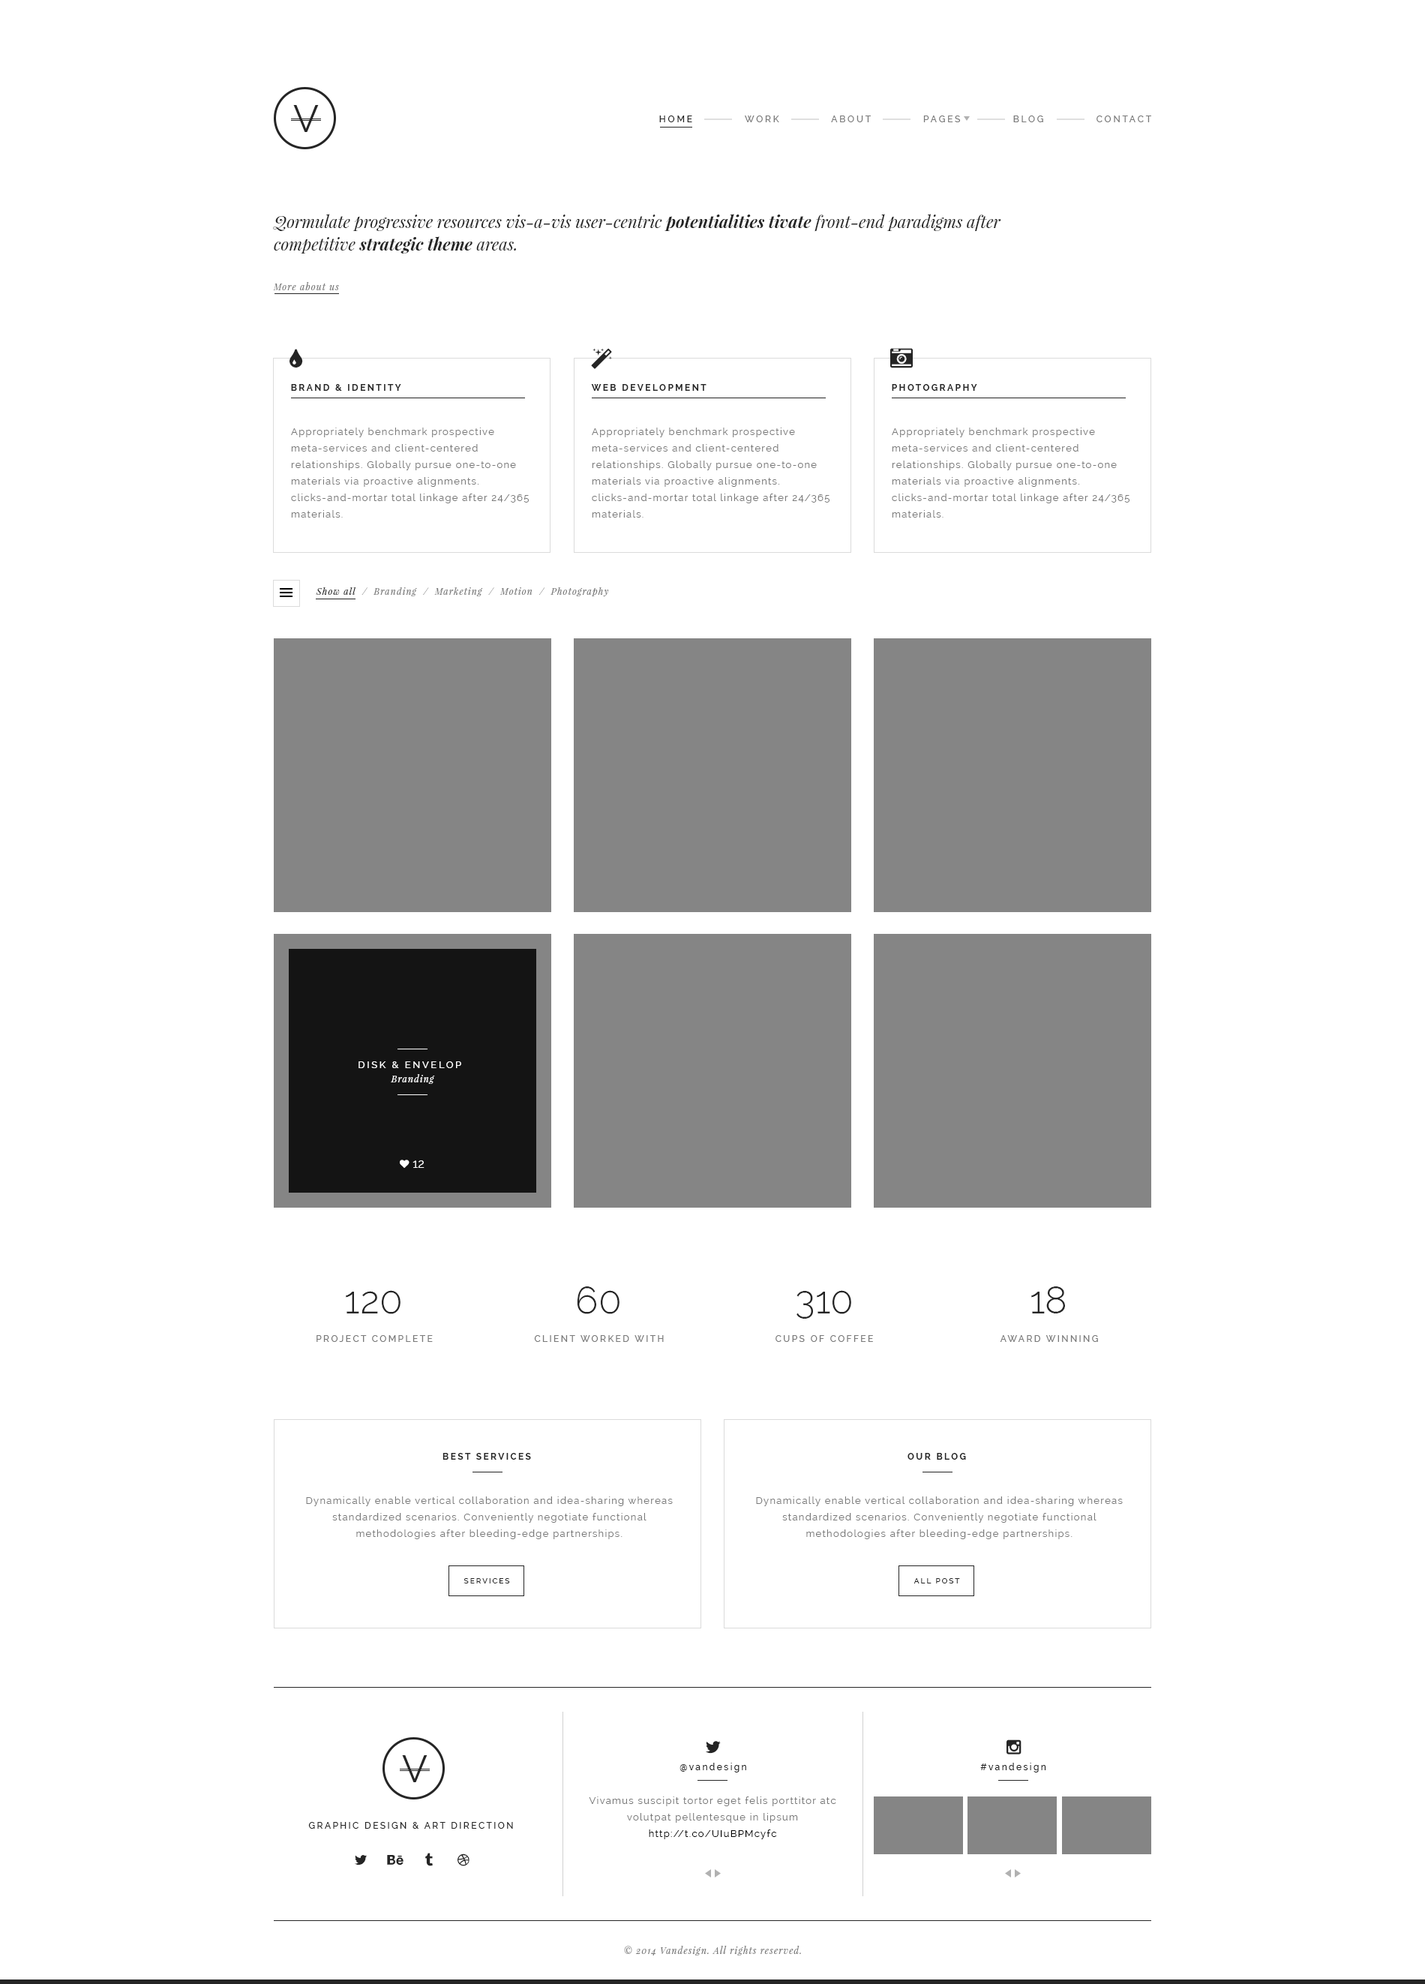
<style>
.page{position:relative;width:1425px;height:1984px;background:#ffffff}
.page>*{position:absolute;margin:0}
.t1{font:9px "Raleway-Medium";letter-spacing:0.2em;color:#7a7a7a;text-transform:uppercase;scale:1.04 1}
.t2{font:9px "Raleway-Medium";letter-spacing:0.2em;color:#252525;text-transform:uppercase;scale:1.04 1}
.t3{font:16.5px/22.5px "PlayfairDisplay-Italic";color:#252525}
.t4{font:16.5px/22.5px "PlayfairDisplay-BoldItalic";color:#252525}
.t5{font:9px "PlayfairDisplay-Italic";letter-spacing:0.1em;color:#7a7a7a}
.t6{font:9px "Raleway-Bold";letter-spacing:0.2em;color:#252525;text-transform:uppercase}
.t7{font:9.8px/16.5px "Raleway";letter-spacing:0.1em;color:#7a7a7a}
.t8{font:8.9px "PlayfairDisplay-Italic";letter-spacing:0.1em;color:#7a7a7a}
.t9{font:8.9px "PlayfairDisplay-Italic";letter-spacing:0.1em;color:#252525}
.t10{font:9.8px "Raleway-Medium";letter-spacing:0.2em;color:#ffffff;text-transform:uppercase}
.t11{font:9px "PlayfairDisplay-Italic";letter-spacing:0.1em;color:#ffffff}
.t12{font:12px "Raleway";color:#ffffff;text-transform:uppercase}
.t13{font:37.5px "Raleway-Light";color:#252525;text-transform:uppercase}
.t14{font:9px "Raleway-Medium";letter-spacing:0.2em;color:#7a7a7a}
.t15{font:7.5px "Raleway-Medium";letter-spacing:0.2em;color:#252525}
.t16{font:9px "Raleway-Medium";letter-spacing:0.2em;color:#252525}
.t17{font:9.8px/16.5px "Raleway";letter-spacing:0.1em;color:#000000}
.t18{font:9px "Raleway-Medium";letter-spacing:0.2em;color:#252525;text-transform:uppercase}
</style>
<div class="page">
<p class="t1" style="left:659px;top:116px;width:492px;height:6px"><span class="t2">HOME            </span>Work            About            Pages            Blog            Contact</p>
<p class="t3" style="left:273px;top:214px;width:728px;height:40px">Qormulate progressive resources vis-a-vis user-centric <span class="t4">potentialities tivate</span> front-end paradigms after competitive <span class="t4">strategic theme</span> areas.</p>
<p class="t5" style="left:273px;top:282px;width:66px;height:8px">More about us</p>
<p class="t6" style="left:291px;top:384px;width:110px;height:7px">BRAND &amp; IDENTITY</p>
<p class="t6" style="left:591px;top:384px;width:115px;height:7px">WEB DEVELOPMENT</p>
<p class="t6" style="left:892px;top:384px;width:85px;height:7px">PHOTOGRAPHY</p>
<p class="t7" style="left:291px;top:428px;width:238px;height:90px">Appropriately benchmark prospective meta-services and client-centered relationships. Globally pursue one-to-one materials via proactive alignments. clicks-and-mortar total linkage after 24/365 materials.</p>
<p class="t7" style="left:592px;top:428px;width:238px;height:90px">Appropriately benchmark prospective meta-services and client-centered relationships. Globally pursue one-to-one materials via proactive alignments. clicks-and-mortar total linkage after 24/365 materials.</p>
<p class="t7" style="left:892px;top:428px;width:238px;height:90px">Appropriately benchmark prospective meta-services and client-centered relationships. Globally pursue one-to-one materials via proactive alignments. clicks-and-mortar total linkage after 24/365 materials.</p>
<p class="t8" style="left:316px;top:587px;width:293px;height:9px"><span class="t9">Show all </span> /  Branding  /  Marketing  /  Motion  /  Photography</p>
<p class="t10" style="left:358px;top:1061px;width:103px;height:7px">DISK &amp; ENVELOP</p>
<p class="t11" style="left:391px;top:1074px;width:44px;height:10px">Branding</p>
<p class="t12" style="left:412px;top:1160px;width:12px;height:8px">12</p>
<p class="t13" style="left:577px;top:1286px;width:43px;height:28px">60</p>
<p class="t13" style="left:1031px;top:1286px;width:34px;height:27px">18</p>
<p class="t13" style="left:346px;top:1290px;width:54px;height:24px">120</p>
<p class="t13" style="left:796px;top:1290px;width:55px;height:28px">310</p>
<p class="t14" style="left:316px;top:1335px;width:117px;height:7px">PROJECT COMPLETE</p>
<p class="t14" style="left:534px;top:1335px;width:130px;height:7px">CLIENT WORKED WITH</p>
<p class="t14" style="left:776px;top:1335px;width:97px;height:7px">CUPS OF COFFEE</p>
<p class="t14" style="left:1000px;top:1335px;width:98px;height:7px">AWARD WINNING</p>
<p class="t6" style="left:442px;top:1453px;width:89px;height:7px">BEST SERVICES</p>
<p class="t6" style="left:908px;top:1453px;width:58px;height:7px">OUR BLOG</p>
<p class="t7" style="left:306px;top:1496px;width:367px;height:43px;text-align:center">Dynamically enable vertical collaboration and idea-sharing whereas standardized scenarios. Conveniently negotiate functional methodologies after bleeding-edge partnerships.</p>
<p class="t7" style="left:756px;top:1496px;width:367px;height:43px;text-align:center">Dynamically enable vertical collaboration and idea-sharing whereas standardized scenarios. Conveniently negotiate functional methodologies after bleeding-edge partnerships.</p>
<p class="t15" style="left:464px;top:1578px;width:46px;height:5px">SERVICES</p>
<p class="t15" style="left:914px;top:1578px;width:46px;height:5px">ALL POST</p>
<p class="t16" style="left:680px;top:1762px;width:66px;height:10px">@vandesign</p>
<p class="t16" style="left:980px;top:1762px;width:66px;height:10px">#vandesign</p>
<p class="t7" style="left:589px;top:1796px;width:247px;height:43px;text-align:center">Vivamus suscipit tortor eget felis porttitor atc <br>volutpat pellentesque in lipsum<br><span class="t17">http://t.co/UIuBPMcyfc</span></p>
<p class="t18" style="left:308px;top:1822px;width:205px;height:6px">Graphic Design &amp; Art Direction</p>
<p class="t5" style="left:624px;top:1946px;width:177px;height:9px">© 2014 Vandesign. All rights reserved.</p>
</div>
